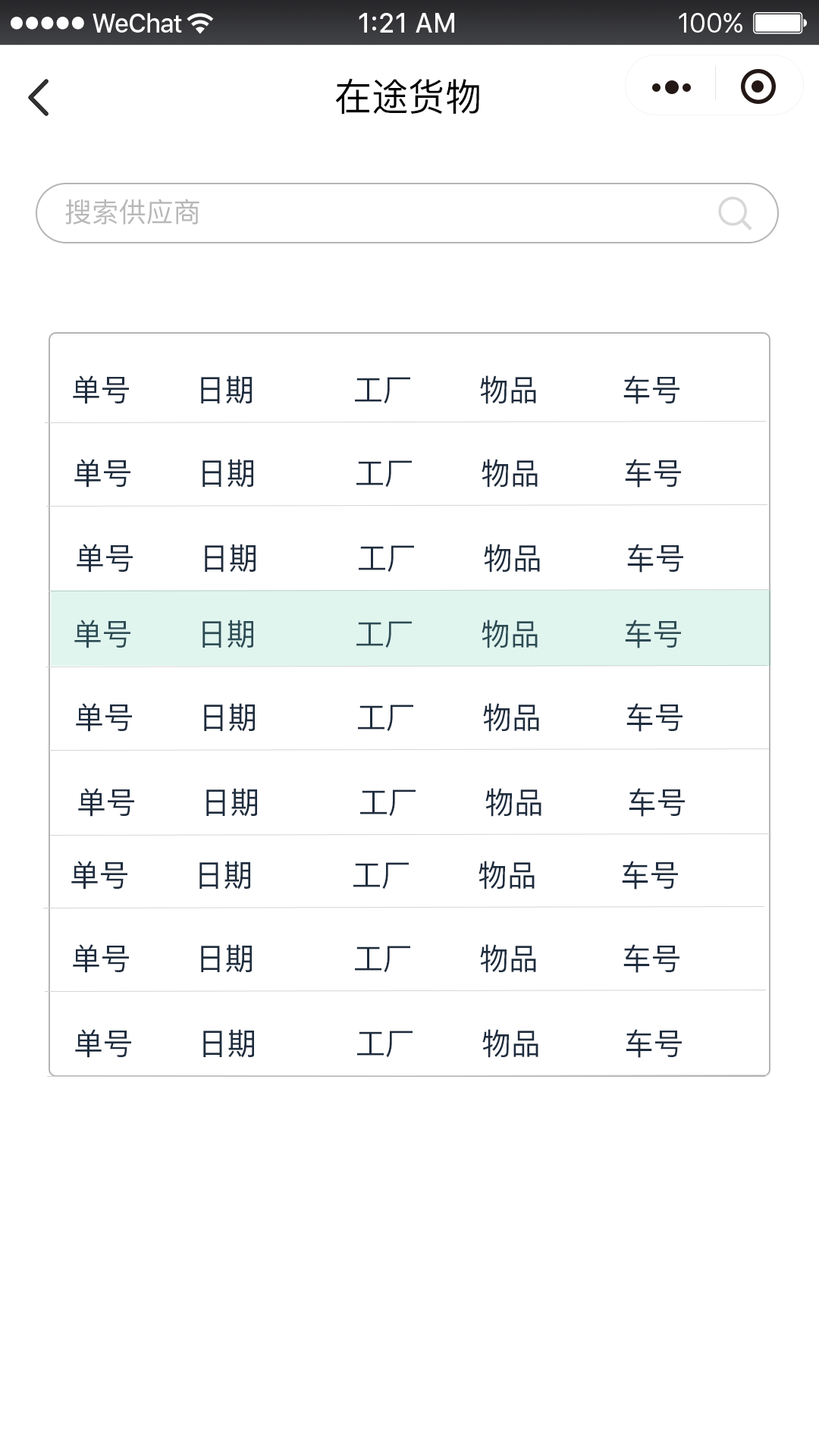
<style>
.page{position:relative;width:819px;height:1456px;background:#ffffff}
.page>*{position:absolute;margin:0}
.t1{font:37.9px "PingFangSC-Regular";color:#000000}
.t2{font:27.3px "PingFangSC-Regular";color:#b8b8b8}
.t3{font:30.3px "PingFangSC-Regular";color:#1e2c3e}
.t4{font:30.3px "PingFangSC-Regular";color:#2d4c55}
</style>
<div class="page">
<p class="t1" style="left:335px;top:78px;width:144px;height:37px">在途货物</p>
<p class="t2" style="left:65px;top:199px;width:134px;height:25px">搜索供应商</p>
<p class="t3" style="left:73px;top:375px;width:56px;height:29px">单号</p>
<p class="t3" style="left:201px;top:375px;width:51px;height:29px">日期</p>
<p class="t3" style="left:355px;top:377px;width:55px;height:27px">工厂</p>
<p class="t3" style="left:480px;top:375px;width:56px;height:29px">物品</p>
<p class="t3" style="left:623px;top:375px;width:56px;height:29px">车号</p>
<p class="t3" style="left:74px;top:459px;width:56px;height:29px">单号</p>
<p class="t3" style="left:202px;top:459px;width:51px;height:29px">日期</p>
<p class="t3" style="left:356px;top:460px;width:56px;height:28px">工厂</p>
<p class="t3" style="left:482px;top:459px;width:56px;height:29px">物品</p>
<p class="t3" style="left:625px;top:459px;width:56px;height:29px">车号</p>
<p class="t3" style="left:77px;top:544px;width:56px;height:29px">单号</p>
<p class="t3" style="left:205px;top:544px;width:51px;height:29px">日期</p>
<p class="t3" style="left:359px;top:545px;width:55px;height:28px">工厂</p>
<p class="t3" style="left:484px;top:544px;width:56px;height:29px">物品</p>
<p class="t3" style="left:627px;top:544px;width:56px;height:29px">车号</p>
<p class="t4" style="left:74px;top:620px;width:56px;height:28px">单号</p>
<p class="t4" style="left:202px;top:620px;width:51px;height:28px">日期</p>
<p class="t4" style="left:356px;top:621px;width:56px;height:27px">工厂</p>
<p class="t4" style="left:482px;top:620px;width:56px;height:28px">物品</p>
<p class="t4" style="left:625px;top:620px;width:56px;height:28px">车号</p>
<p class="t3" style="left:76px;top:703px;width:56px;height:29px">单号</p>
<p class="t3" style="left:204px;top:703px;width:51px;height:29px">日期</p>
<p class="t3" style="left:358px;top:704px;width:55px;height:28px">工厂</p>
<p class="t3" style="left:483px;top:703px;width:56px;height:29px">物品</p>
<p class="t3" style="left:626px;top:703px;width:56px;height:29px">车号</p>
<p class="t3" style="left:78px;top:788px;width:56px;height:29px">单号</p>
<p class="t3" style="left:206px;top:788px;width:51px;height:29px">日期</p>
<p class="t3" style="left:360px;top:789px;width:56px;height:28px">工厂</p>
<p class="t3" style="left:485px;top:788px;width:56px;height:29px">物品</p>
<p class="t3" style="left:629px;top:788px;width:56px;height:29px">车号</p>
<p class="t3" style="left:71px;top:861px;width:56px;height:29px">单号</p>
<p class="t3" style="left:199px;top:861px;width:51px;height:29px">日期</p>
<p class="t3" style="left:353px;top:862px;width:56px;height:28px">工厂</p>
<p class="t3" style="left:479px;top:861px;width:56px;height:29px">物品</p>
<p class="t3" style="left:622px;top:861px;width:56px;height:29px">车号</p>
<p class="t3" style="left:73px;top:944px;width:56px;height:29px">单号</p>
<p class="t3" style="left:201px;top:944px;width:51px;height:29px">日期</p>
<p class="t3" style="left:355px;top:946px;width:55px;height:27px">工厂</p>
<p class="t3" style="left:480px;top:944px;width:56px;height:29px">物品</p>
<p class="t3" style="left:623px;top:944px;width:56px;height:29px">车号</p>
<p class="t3" style="left:75px;top:1029px;width:56px;height:29px">单号</p>
<p class="t3" style="left:203px;top:1029px;width:51px;height:29px">日期</p>
<p class="t3" style="left:357px;top:1031px;width:56px;height:27px">工厂</p>
<p class="t3" style="left:482px;top:1029px;width:56px;height:29px">物品</p>
<p class="t3" style="left:626px;top:1029px;width:56px;height:29px">车号</p>
</div>
